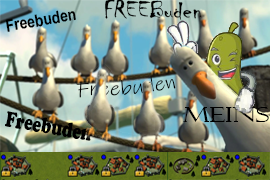
<style>
.page{position:relative;width:270px;height:180px}
.page>*{position:absolute;margin:0}
.t1{font:25px "Chiller-Regular";color:#000000;scale:1.12 1}
.t2{font:17px "ArialNarrow-Bold";color:#000000}
.t3{font:20.2px "InkFree";color:#020202;scale:1.09 1}
.t4{font:22.6px "CooperBlack";color:#000000;scale:0.72 1}
.t5{font:19.6px "FelixTitlingMT";color:#000000;scale:1.48 1}
</style>
<div class="page">
<p class="t1" style="left:105px;top:0px;width:96px;height:20px;rotate:1deg">FREEBuden</p>
<p class="t2" style="left:5px;top:10px;width:71px;height:22px;rotate:-10deg">Freebuden</p>
<p class="t3" style="left:76px;top:76px;width:100px;height:22px;rotate:-4deg">Freebuden</p>
<p class="t4" style="left:5px;top:111px;width:86px;height:30px;rotate:10deg">Freebuden</p>
<p class="t5" style="left:183px;top:107px;width:86px;height:15px">Meins</p>
</div>
